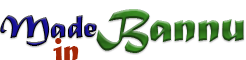
<style>
.page{position:relative;width:246px;height:60px;background:#ffffff}
.page>*{position:absolute;margin:0}
.t1{font:34px "MaturaMTScriptCapitals"}
.t2{font:49.2px "MaturaMTScriptCapitals"}
.t3{font:34px "MaturaMTScriptCapitals";color:#a42707}
</style>
<div class="page">
<p class="t1" style="left:0px;top:15px;width:97px;height:31px">Made</p>
<p class="t2" style="left:96px;top:9px;width:148px;height:44px">Bannu</p>
<p class="t3" style="left:53px;top:38px;width:26px;height:24px">in</p>
</div>
